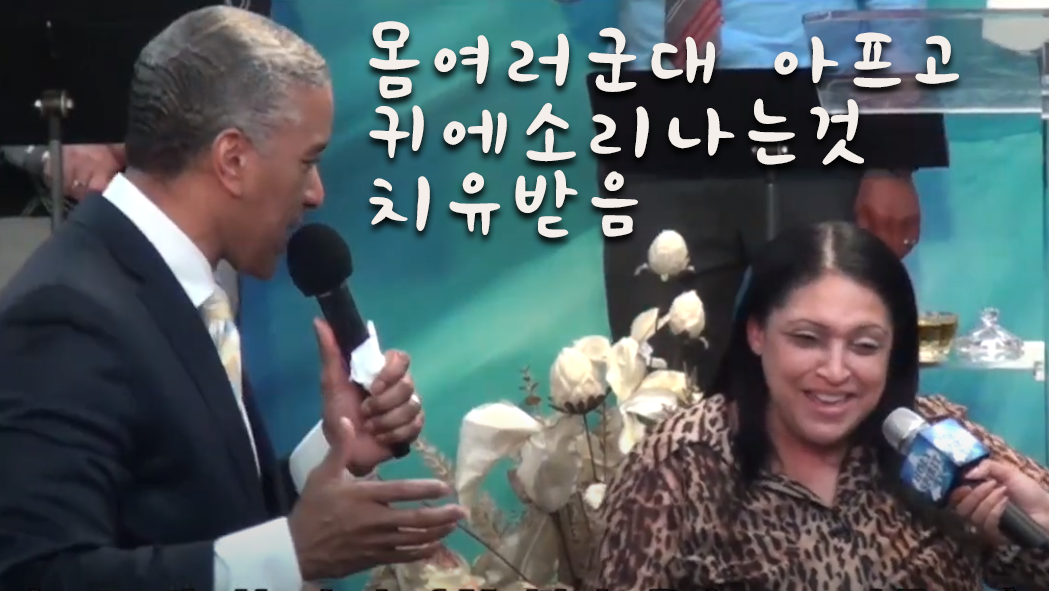
<style>
.page{position:relative;width:1049px;height:591px}
.page>*{position:absolute;margin:0}
.t1{font:100px/72px "iceSotong-Rg";letter-spacing:0.1em;color:#f4efea}
</style>
<div class="page">
<p class="t1" style="left:369px;top:21px;width:590px;height:217px">몸여러군대 아프고 <br>귀에소리나는것<br>치유받음</p>
</div>
